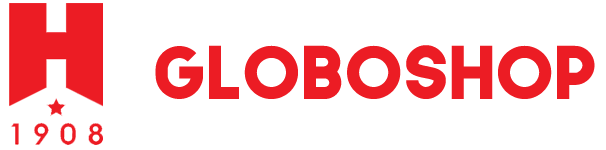
<style>
.page{position:relative;width:606px;height:150px;background:#ffffff}
.page>*{position:absolute;margin:0}
.t1{font:72px "TheNextFont";letter-spacing:0.005em;color:#ec1c24}
</style>
<div class="page">
<p class="t1" style="left:155px;top:45px;width:440px;height:54px">GLOBOSHOP</p>
</div>
